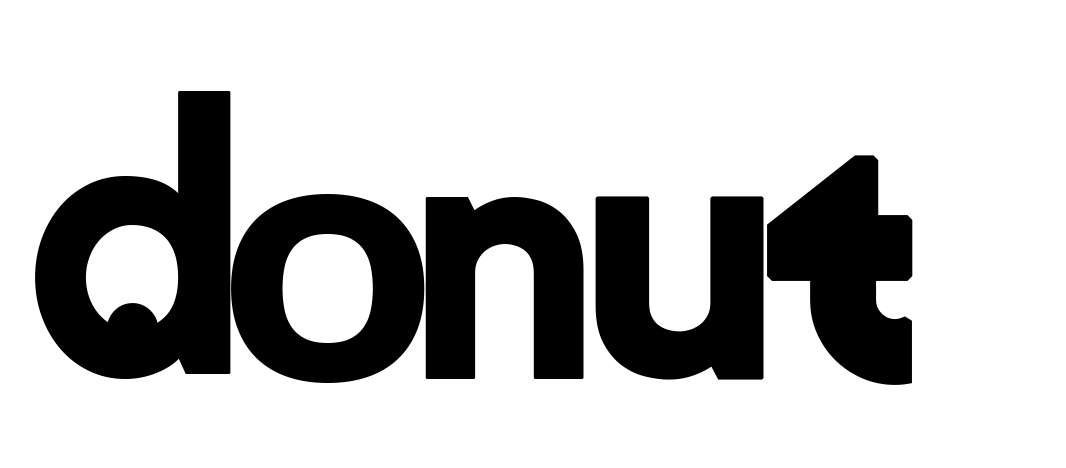
<style>
.page{position:relative;width:1066px;height:468px;background:#ffffff}
.page>*{position:absolute;margin:0}
.t1{font:384.8px "Kollektif-Bold";letter-spacing:-0.01em;color:#000000;font-weight:bold;scale:0.95 1}
.t2{font:362.2px "koliko-Bold";letter-spacing:-0.01em;color:#000000;font-weight:bold}
.t3{font:322.5px "HighlandGothicFLF";letter-spacing:-0.01em;color:#000000;font-weight:bold}
.t4{font:362.2px "Kollektif-Bold";letter-spacing:-0.01em;color:#000000;font-weight:bold;scale:0.95 1}
.t5{font:362.2px "Kollektif-Bold";letter-spacing:-0.01em;color:#000000;font-weight:bold}
.t6{font:362.2px "koliko-Regular";letter-spacing:-0.01em;color:#000000;font-weight:bold}
</style>
<div class="page">
<p class="t1" style="left:35px;top:91px;width:196px;height:288px">d</p>
<p class="t2" style="left:767px;top:155px;width:146px;height:230px">t</p>
<p class="t3" style="left:231px;top:194px;width:194px;height:189px">o</p>
<p class="t4" style="left:425px;top:197px;width:159px;height:182px">n</p>
<p class="t5" style="left:595px;top:196px;width:169px;height:184px">u</p>
<p class="t6" style="left:107px;top:303px;width:52px;height:51px">.</p>
</div>
